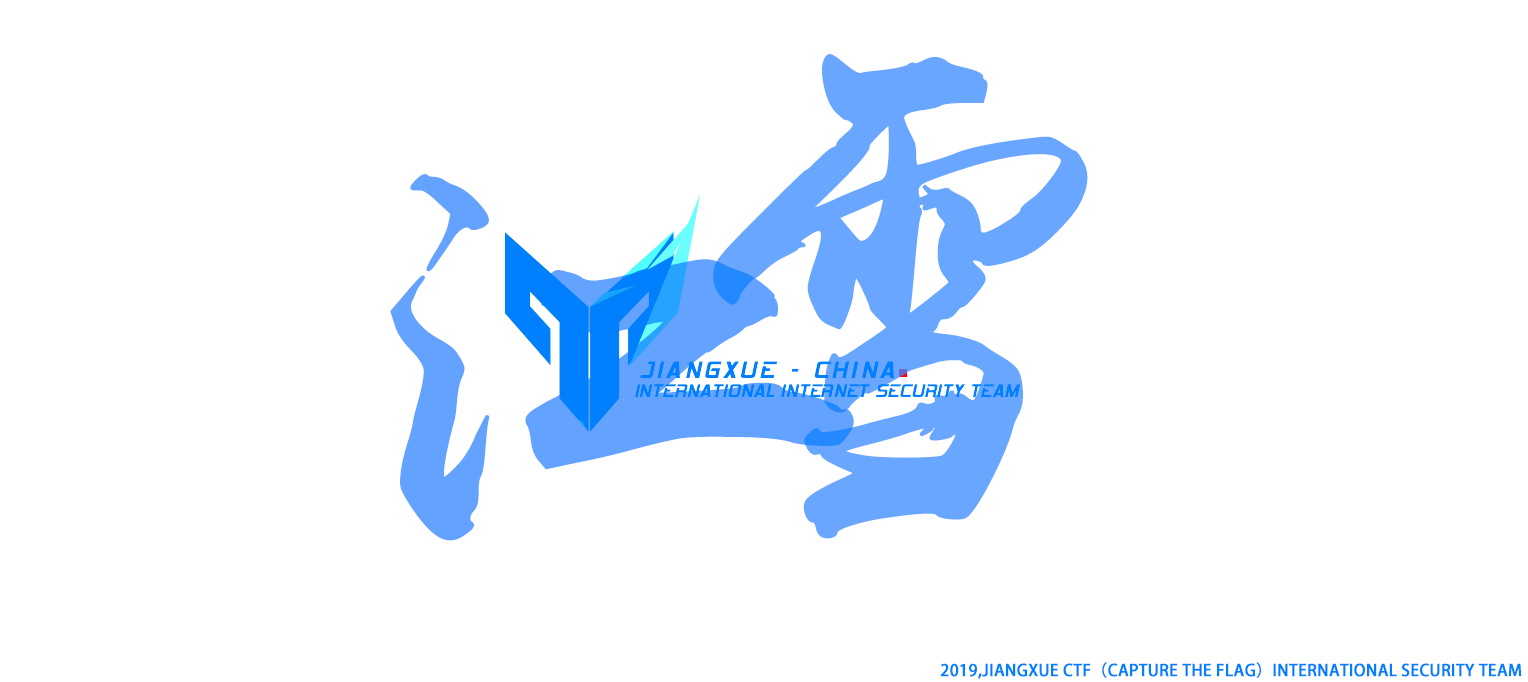
<style>
.page{position:relative;width:1528px;height:682px;background:#ffffff}
.page>*{position:absolute;margin:0}
.t1{font:496.1px "yuweijmfx";color:#69a6ff;font-weight:bold}
.t2{font:496.1px "yuweijmfx";color:#63a3ff;font-weight:bold}
.t3{font:16px "AdobeHeitiStd-Regular";color:#007fff;font-weight:bold}
</style>
<div class="page">
<p class="t1" style="left:713px;top:54px;width:375px;height:485px">雪</p>
<p class="t2" style="left:390px;top:174px;width:464px;height:367px">江</p>
<p class="t3" style="left:940px;top:662px;width:582px;height:17px">2019,JIANGXUE CTF（CAPTURE THE FLAG）INTERNATIONAL SECURITY TEAM</p>
</div>
